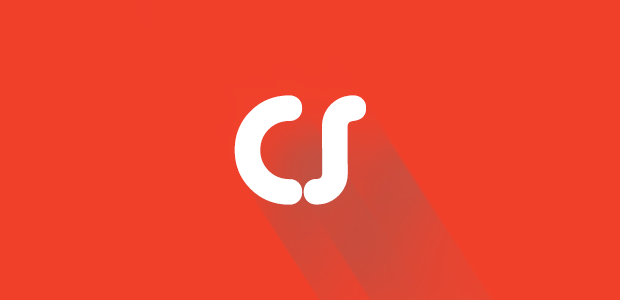
<style>
.page{position:relative;width:620px;height:300px;background:#f1402a}
.page>*{position:absolute;margin:0}
.t1{font:144px "AlbaMatter";color:#ffffff}
</style>
<div class="page">
<p class="t1" style="left:234px;top:95px;width:69px;height:110px">C</p>
<p class="t1" style="left:303px;top:95px;width:63px;height:110px">S</p>
</div>
